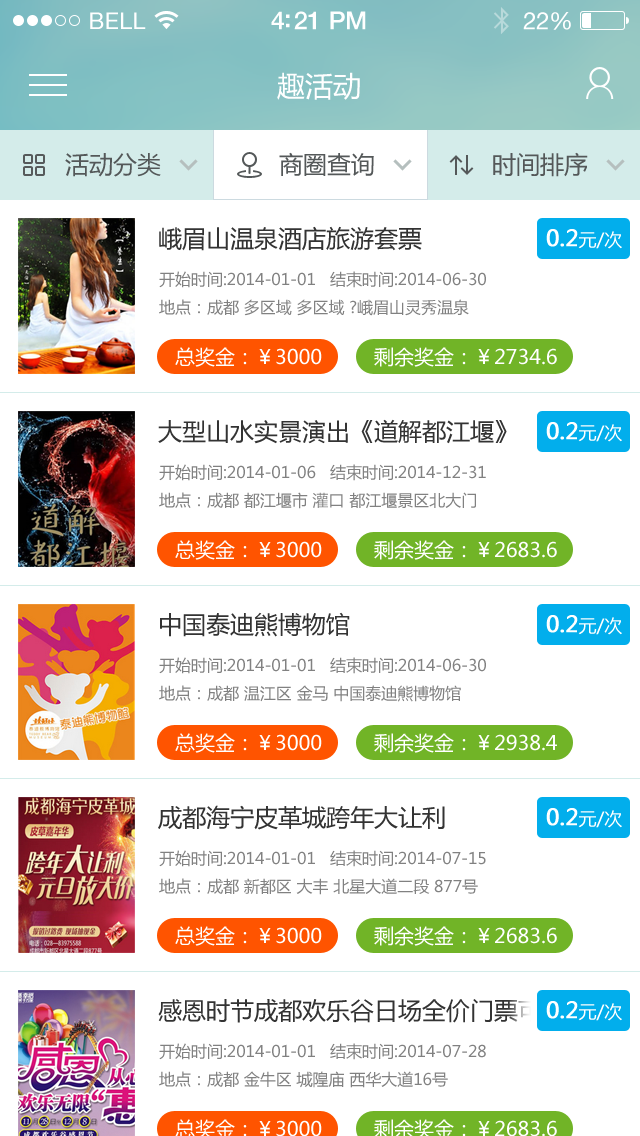
<style>
.page{position:relative;width:640px;height:1136px;background:#ffffff}
.page>*{position:absolute;margin:0}
.t1{font:23px "HelveticaNeue";letter-spacing:0.02em;color:#ffffff}
.t2{font:25px "HelveticaNeue-Medium";letter-spacing:-0.02em;color:#ffffff}
.t3{font:24px "HelveticaNeue";letter-spacing:-0.02em;color:#ffffff}
.t4{font:28px "MicrosoftYaHei";color:#ffffff}
.t5{font:24px "MicrosoftYaHei";color:#545859}
.t6{font:24px "MicrosoftYaHei";color:#333333}
.t7{font:22px "MicrosoftYaHei";color:#ffffff;font-weight:bold}
.t8{font:18px "MicrosoftYaHei";color:#ffffff}
.t9{font:16px "MicrosoftYaHei";color:#818181}
.t10{font:20px "MicrosoftYaHei";color:#ffffff}
</style>
<div class="page">
<p class="t1" style="left:90px;top:12px;width:56px;height:17px">BELL</p>
<p class="t2" style="left:271px;top:11px;width:95px;height:19px">4:21 PM</p>
<p class="t3" style="left:523px;top:12px;width:48px;height:18px">22%</p>
<p class="t4" style="left:277px;top:72px;width:83px;height:28px">趣活动</p>
<p class="t5" style="left:65px;top:153px;width:96px;height:24px">活动分类</p>
<p class="t5" style="left:279px;top:152px;width:95px;height:24px">商圈查询</p>
<p class="t5" style="left:493px;top:152px;width:95px;height:25px">时间排序</p>
<p class="t6" style="left:159px;top:226px;width:263px;height:25px">峨眉山温泉酒店旅游套票</p>
<p class="t7" style="left:546px;top:229px;width:76px;height:20px">0.2<span class="t8">元/次</span></p>
<p class="t9" style="left:159px;top:271px;width:327px;height:17px">开始时间:2014-01-01   结束时间:2014-06-30</p>
<p class="t9" style="left:159px;top:299px;width:310px;height:17px">地点：成都 多区域 多区域 ?峨眉山灵秀温泉</p>
<p class="t10" style="left:175px;top:347px;width:147px;height:20px">总奖金：￥3000</p>
<p class="t10" style="left:374px;top:347px;width:183px;height:20px">剩余奖金：￥2734.6</p>
<p class="t6" style="left:158px;top:419px;width:349px;height:25px">大型山水实景演出《道解都江堰》</p>
<p class="t7" style="left:546px;top:422px;width:76px;height:20px">0.2<span class="t8">元/次</span></p>
<p class="t9" style="left:159px;top:464px;width:327px;height:17px">开始时间:2014-01-06   结束时间:2014-12-31</p>
<p class="t9" style="left:159px;top:492px;width:317px;height:17px">地点：成都 都江堰市 灌口 都江堰景区北大门</p>
<p class="t10" style="left:175px;top:540px;width:147px;height:20px">总奖金：￥3000</p>
<p class="t10" style="left:374px;top:540px;width:183px;height:20px">剩余奖金：￥2683.6</p>
<p class="t6" style="left:160px;top:612px;width:190px;height:25px">中国泰迪熊博物馆</p>
<p class="t7" style="left:546px;top:615px;width:76px;height:20px">0.2<span class="t8">元/次</span></p>
<p class="t9" style="left:159px;top:657px;width:327px;height:17px">开始时间:2014-01-01   结束时间:2014-06-30</p>
<p class="t9" style="left:159px;top:685px;width:302px;height:17px">地点：成都 温江区 金马 中国泰迪熊博物馆</p>
<p class="t10" style="left:175px;top:733px;width:147px;height:20px">总奖金：￥3000</p>
<p class="t10" style="left:374px;top:733px;width:183px;height:20px">剩余奖金：￥2938.4</p>
<p class="t6" style="left:158px;top:805px;width:287px;height:25px">成都海宁皮革城跨年大让利</p>
<p class="t7" style="left:546px;top:808px;width:76px;height:20px">0.2<span class="t8">元/次</span></p>
<p class="t9" style="left:159px;top:850px;width:327px;height:17px">开始时间:2014-01-01   结束时间:2014-07-15</p>
<p class="t9" style="left:159px;top:878px;width:319px;height:17px">地点：成都 新都区 大丰 北星大道二段 877号</p>
<p class="t10" style="left:175px;top:926px;width:147px;height:20px">总奖金：￥3000</p>
<p class="t10" style="left:374px;top:926px;width:183px;height:20px">剩余奖金：￥2683.6</p>
<p class="t7" style="left:546px;top:1001px;width:76px;height:20px">0.2<span class="t8">元/次</span></p>
<p class="t9" style="left:159px;top:1043px;width:327px;height:17px">开始时间:2014-01-01   结束时间:2014-07-28</p>
<p class="t9" style="left:159px;top:1071px;width:289px;height:17px">地点：成都 金牛区 城隍庙 西华大道16号</p>
</div>
